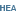
<style>
.page{position:relative;width:16px;height:16px;background:#ffffff}
.page>*{position:absolute;margin:0}
.t1{font:8px "Arial-BoldMT";color:#487797}
</style>
<div class="page">
<p class="t1" style="left:0px;top:5px;width:17px;height:6px">HEA</p>
</div>
